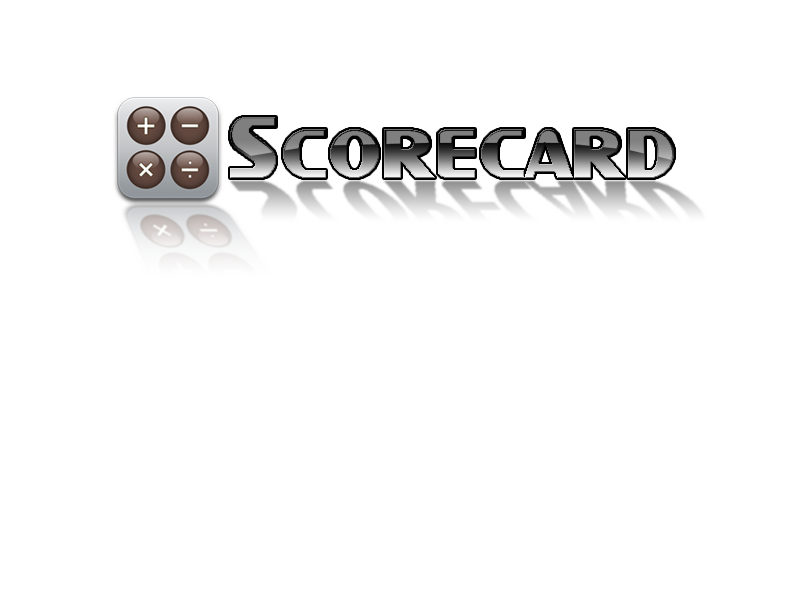
<style>
.page{position:relative;width:800px;height:600px;background:#ffffff}
.page>*{position:absolute;margin:0}
.t1{font:92.1px "SFIntellivised";letter-spacing:0.01em;color:#000000}
</style>
<div class="page">
<p class="t1" style="left:230px;top:117px;width:444px;height:61px">Scorecard</p>
</div>
